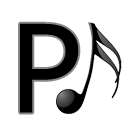
<style>
.page{position:relative;width:128px;height:128px;background:#ffffff}
.page>*{position:absolute;margin:0}
.t1{font:120.9px "Verdana";letter-spacing:-0.075em;color:#000000;font-weight:bold}
</style>
<div class="page">
<p class="t1" style="left:20px;top:23px;width:59px;height:90px">P</p>
</div>
